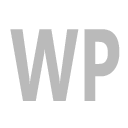
<style>
.page{position:relative;width:128px;height:128px;background:#ffffff}
.page>*{position:absolute;margin:0}
.t1{font:102.4px "Ebrima-Bold";color:#bababa;scale:0.67 1}
</style>
<div class="page">
<p class="t1" style="left:10px;top:29px;width:110px;height:72px">WP</p>
</div>
